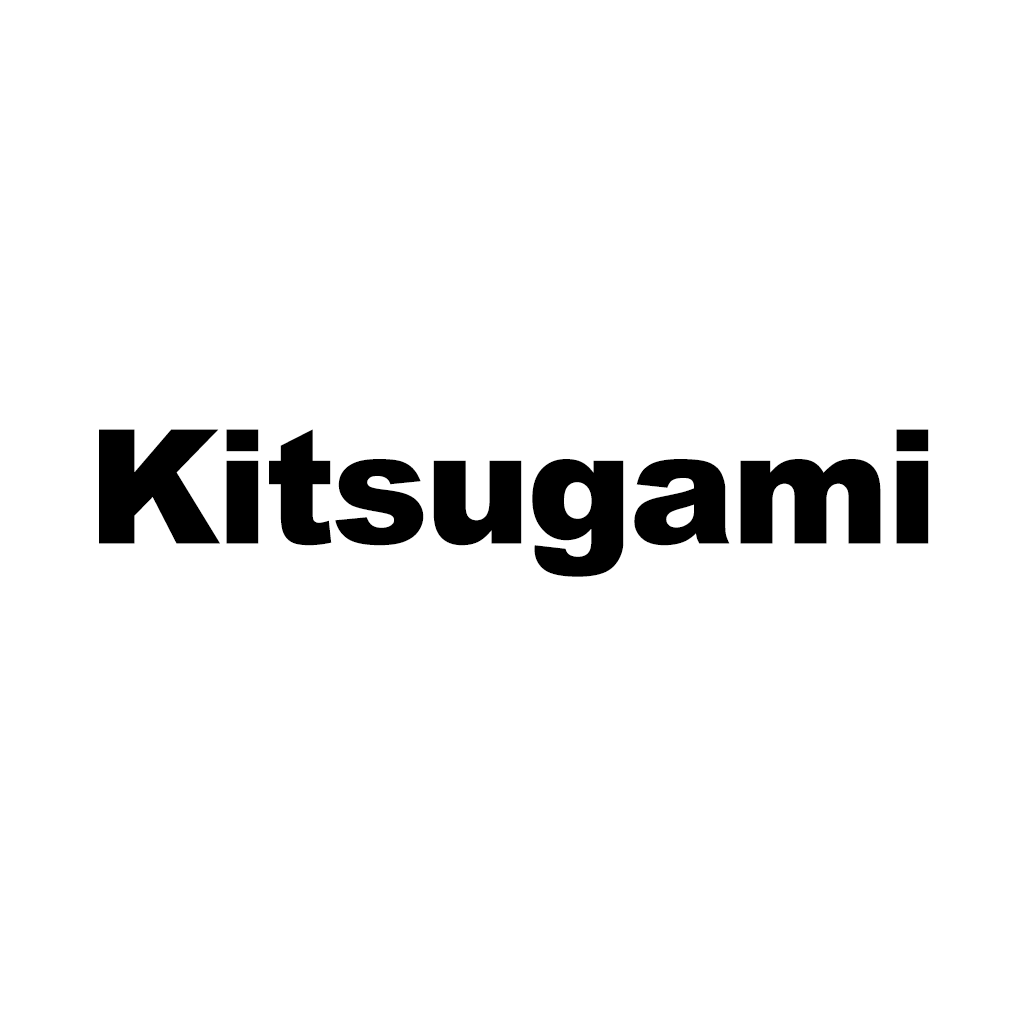
<style>
.page{position:relative;width:1024px;height:1024px;background:#ffffff}
.page>*{position:absolute;margin:0}
.t1{font:159px "Arial-Black";letter-spacing:-0.025em;color:#000000}
</style>
<div class="page">
<p class="t1" style="left:99px;top:429px;width:830px;height:148px">Kitsugami</p>
</div>
